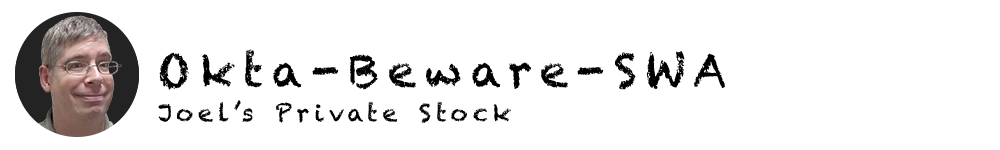
<style>
.page{position:relative;width:1000px;height:150px;background:#ffffff}
.page>*{position:absolute;margin:0}
.t1{font:45.1px "Chalkduster";letter-spacing:0.2em;color:#000000}
.t2{font:24px "Chalkduster";letter-spacing:0.2em;color:#000000}
</style>
<div class="page">
<p class="t1" style="left:159px;top:49px;width:566px;height:41px">Okta-Beware-SWA</p>
<p class="t2" style="left:158px;top:100px;width:353px;height:23px">Joel’s Private Stock</p>
</div>
